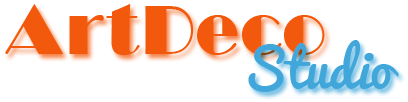
<style>
.page{position:relative;width:408px;height:102px;background:#ffffff}
.page>*{position:absolute;margin:0}
.t1{font:64px "Broadway_cyr";color:#f2590c}
.t2{font:52px "Pacifico";color:#41a6d9}
</style>
<div class="page">
<p class="t1" style="left:5px;top:3px;width:320px;height:52px">ArtDeco</p>
<p class="t2" style="left:248px;top:40px;width:151px;height:52px">Studio</p>
</div>
